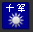
<style>
.page{position:relative;width:33px;height:32px;background:#000090}
.page>*{position:absolute;margin:0}
.t1{font:10.4px "SimSun";color:#ffffff}
</style>
<div class="page">
<p class="t1" style="left:6px;top:4px;width:19px;height:8px">十军</p>
</div>
